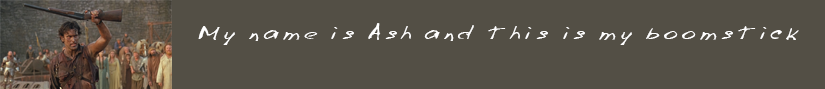
<style>
.page{position:relative;width:825px;height:89px;background:#534f45}
.page>*{position:absolute;margin:0}
.t1{font:22.6px "LazyCrazy";color:#ffffff;scale:1.64 1}
</style>
<div class="page">
<p class="t1" style="left:198px;top:23px;width:601px;height:22px">My name is Ash and this is my boomstick</p>
</div>
